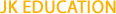
<style>
.page{position:relative;width:116px;height:14px;background:#ffffff}
.page>*{position:absolute;margin:0}
.t1{font:18px "MyriadPro-Regular";color:#fcb201;font-weight:bold}
.t2{font:18px "MyriadPro-Regular";color:#ffffff;font-weight:bold}
</style>
<div class="page">
<p class="t1" style="left:0px;top:0px;width:116px;height:14px"><span class="t2"> </span>JK EDUCATION</p>
</div>
